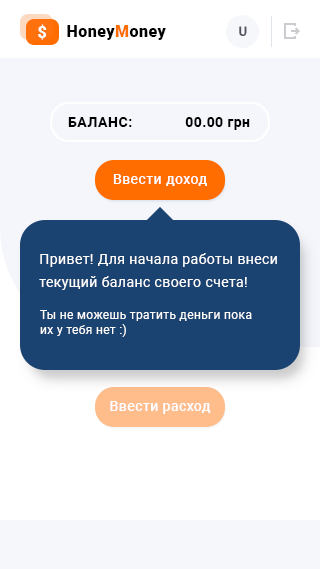
<style>
.page{position:relative;width:320px;height:569px;background:#ffffff}
.page>*{position:absolute;margin:0}
.t1{font:16px "Roboto-Black";letter-spacing:0.03em;color:#ffffff}
.t2{font:16px "Roboto-Black";letter-spacing:0.03em;color:#000000}
.t3{font:16px "Roboto-Black";letter-spacing:0.03em;color:#ff6c00}
.t4{font:13px "Roboto-Medium";letter-spacing:0.035em;color:#52555f}
.t5{font:14px "Roboto-Bold";letter-spacing:0.04em;color:#000000;text-transform:uppercase}
.t6{font:14px "Roboto-Bold";letter-spacing:0.03em;color:#000000}
.t7{font:14px "Roboto-Medium";letter-spacing:0.03em;color:#ffffff}
.t8{font:14px/23px "Roboto-Regular";letter-spacing:0.03em;color:#ffffff}
.t9{font:12px/15px "Roboto-Regular";letter-spacing:0.03em;color:#ffffff}
</style>
<div class="page">
<p class="t1" style="left:38px;top:24px;width:9px;height:16px">$</p>
<p class="t2" style="left:67px;top:25px;width:99px;height:15px">Honey<span class="t3">M</span>oney</p>
<p class="t4" style="left:239px;top:26px;width:8px;height:10px">U</p>
<p class="t5" style="left:68px;top:117px;width:64px;height:10px">баланс:</p>
<p class="t6" style="left:185px;top:117px;width:65px;height:13px">00.00 грн</p>
<p class="t7" style="left:113px;top:174px;width:94px;height:12px">Ввести доход</p>
<p class="t8" style="left:39px;top:253px;width:238px;height:37px">Привет! Для начала работы внеси текущий баланс своего счета!</p>
<p class="t9" style="left:40px;top:310px;width:212px;height:27px">Ты не можешь тратить деньги пока <br>их у тебя нет :)</p>
<p class="t7" style="left:110px;top:401px;width:101px;height:13px">Ввести расход</p>
</div>
